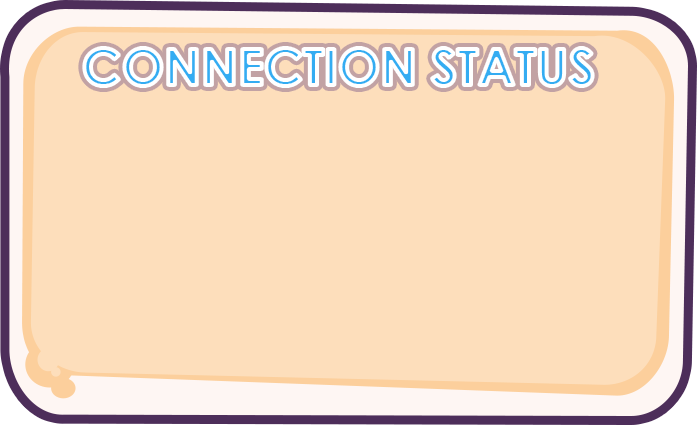
<style>
.page{position:relative;width:697px;height:425px;background:#fddebb}
.page>*{position:absolute;margin:0}
.t1{font:50.1px "CenturyGothic-Bold"}
</style>
<div class="page">
<p class="t1" style="left:84px;top:48px;width:509px;height:38px">CONNECTION STATUS</p>
</div>
